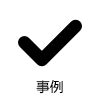
<style>
.page{position:relative;width:100px;height:100px;background:#ffffff}
.page>*{position:absolute;margin:0}
.t1{font:13.6px "Meiryo";color:#000000}
</style>
<div class="page">
<p class="t1" style="left:36px;top:80px;width:27px;height:14px">事例</p>
</div>
